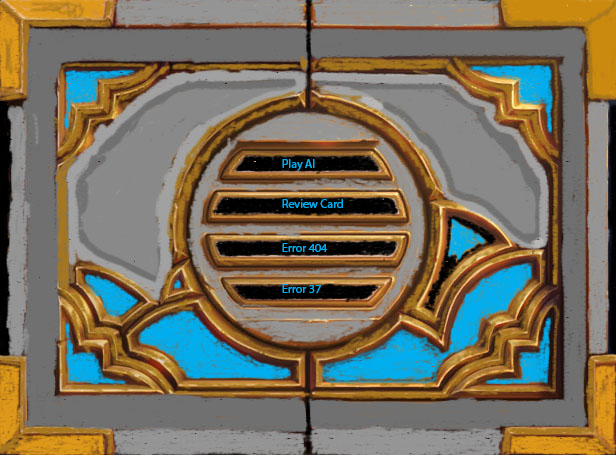
<style>
.page{position:relative;width:616px;height:455px}
.page>*{position:absolute;margin:0}
.t1{font:12px "MyriadPro-Regular";color:#00aeef}
</style>
<div class="page">
<p class="t1" style="left:282px;top:159px;width:33px;height:12px">Play AI</p>
<p class="t1" style="left:282px;top:199px;width:61px;height:9px">Review Card</p>
<p class="t1" style="left:282px;top:243px;width:46px;height:9px">Error 404</p>
<p class="t1" style="left:282px;top:284px;width:39px;height:9px">Error 37</p>
</div>
